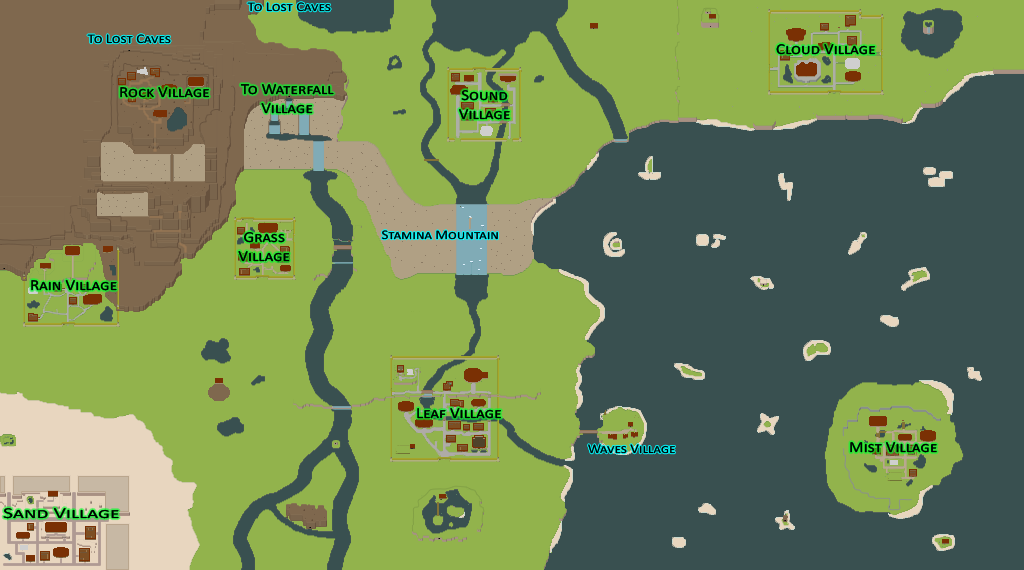
<style>
.page{position:relative;width:1024px;height:570px;background:#92b34c}
.page>*{position:absolute;margin:0}
.t1{font:13.3px "Calibri";color:#000000;font-variant:small-caps;scale:1.13 1}
.t2{font:15.2px "Calibri";color:#000000;font-variant:small-caps;scale:1.13 1}
.t3{font:15.2px "Calibri";color:#000000;font-variant:small-caps;scale:1.44 1}
</style>
<div class="page">
<p class="t1" style="left:247px;top:2px;width:84px;height:10px">To Lost Caves</p>
<p class="t1" style="left:247px;top:2px;width:84px;height:10px">To Lost Caves</p>
<p class="t1" style="left:87px;top:34px;width:84px;height:10px">To Lost Caves</p>
<p class="t1" style="left:87px;top:34px;width:84px;height:10px">To Lost Caves</p>
<p class="t2" style="left:776px;top:44px;width:99px;height:11px">Cloud Village</p>
<p class="t2" style="left:776px;top:44px;width:99px;height:11px">Cloud Village</p>
<p class="t2" style="left:120px;top:87px;width:89px;height:11px">Rock Village</p>
<p class="t2" style="left:120px;top:87px;width:89px;height:11px">Rock Village</p>
<p class="t2" style="left:240px;top:84px;width:94px;height:30px;text-align:center">To Waterfall<br>Village</p>
<p class="t2" style="left:240px;top:84px;width:94px;height:30px;text-align:center">To Waterfall<br>Village</p>
<p class="t2" style="left:459px;top:90px;width:51px;height:30px;text-align:center">Sound<br>Village</p>
<p class="t2" style="left:459px;top:90px;width:51px;height:30px;text-align:center">Sound<br>Village</p>
<p class="t2" style="left:238px;top:232px;width:52px;height:30px;text-align:center">Grass<br>Village</p>
<p class="t2" style="left:238px;top:232px;width:52px;height:30px;text-align:center">Grass<br>Village</p>
<p class="t1" style="left:381px;top:230px;width:117px;height:10px">Stamina Mountain</p>
<p class="t1" style="left:381px;top:230px;width:117px;height:10px">Stamina Mountain</p>
<p class="t2" style="left:31px;top:280px;width:86px;height:11px">Rain Village</p>
<p class="t2" style="left:31px;top:280px;width:86px;height:11px">Rain Village</p>
<p class="t2" style="left:417px;top:408px;width:84px;height:11px">Leaf Village</p>
<p class="t2" style="left:417px;top:408px;width:84px;height:11px">Leaf Village</p>
<p class="t1" style="left:588px;top:444px;width:87px;height:10px">Waves Village</p>
<p class="t1" style="left:588px;top:444px;width:87px;height:10px">Waves Village</p>
<p class="t2" style="left:850px;top:442px;width:87px;height:11px">Mist Village</p>
<p class="t2" style="left:850px;top:442px;width:87px;height:11px">Mist Village</p>
<p class="t3" style="left:3px;top:508px;width:116px;height:11px">Sand Village</p>
<p class="t3" style="left:3px;top:508px;width:116px;height:11px">Sand Village</p>
</div>
